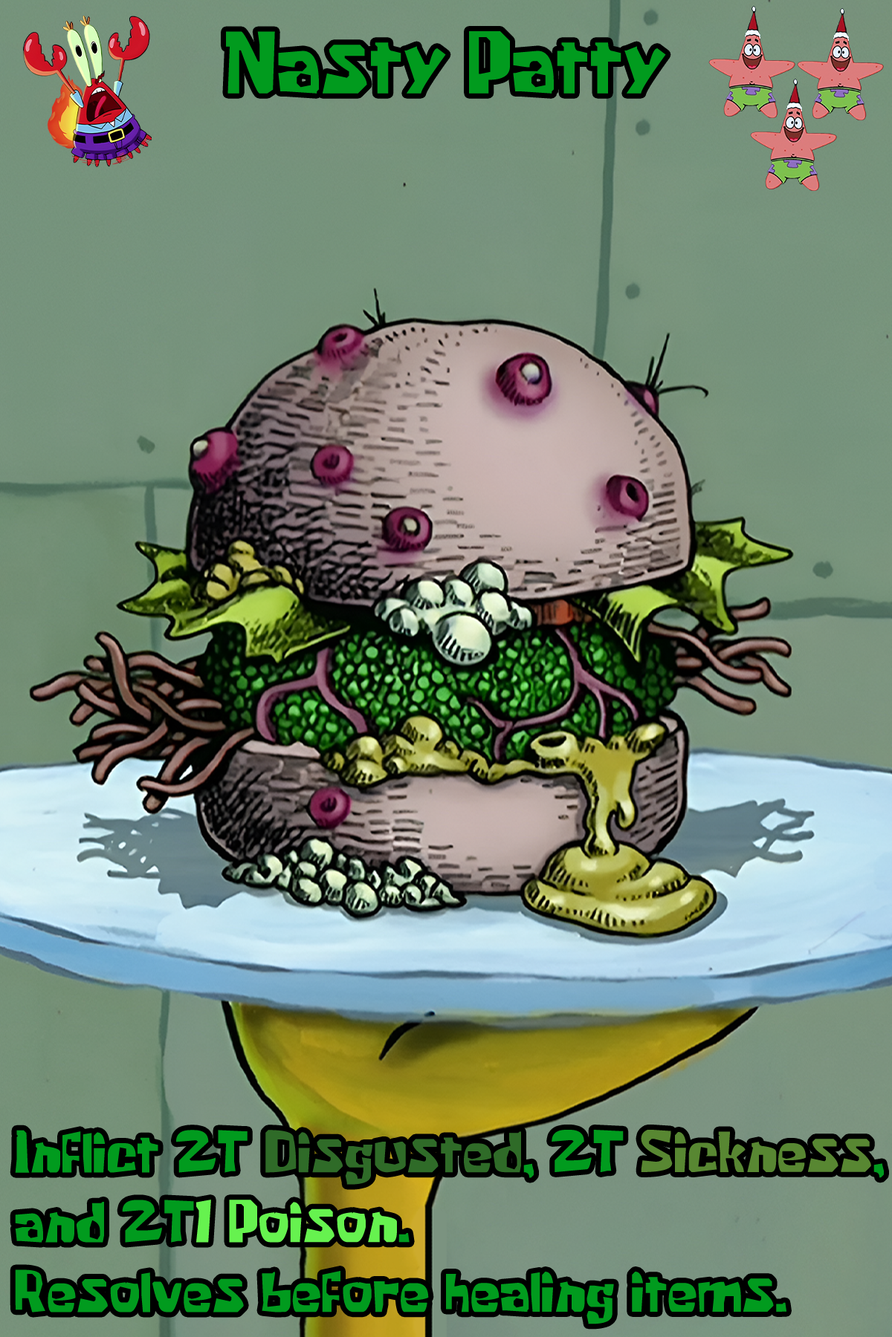
<style>
.page{position:relative;width:892px;height:1337px}
.page>*{position:absolute;margin:0}
.t1{font:141.9px "KrabbyPatty";color:#019b1e}
.t2{font:96.6px/69.8px "KrabbyPatty";color:#019b1e}
.t3{font:96.6px/69.8px "KrabbyPatty";color:#2f6b28}
.t4{font:96.6px/69.8px "KrabbyPatty";color:#588732}
.t5{font:96.6px/69.8px "KrabbyPatty";color:#66f24f}
</style>
<div class="page">
<p class="t1" style="left:226px;top:31px;width:440px;height:63px">Nasty Patty</p>
<p class="t2" style="left:15px;top:1130px;width:868px;height:195px">Inflict 2T <span class="t3">Disgusted</span>, 2T <span class="t4">Sickness</span>, and 2T<span class="t5">1 Poison</span>.<br>Resolves before healing items.</p>
</div>
